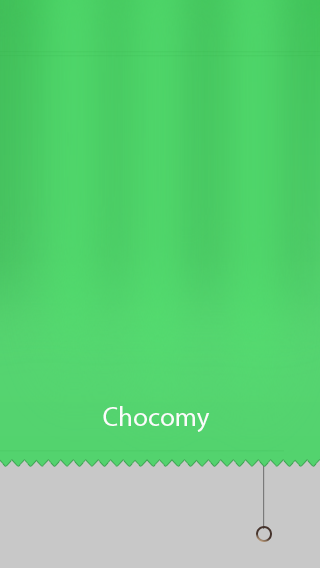
<style>
.page{position:relative;width:320px;height:568px}
.page>*{position:absolute;margin:0}
.t1{font:27px "MyriadPro-Regular";color:#fbfbfb}
</style>
<div class="page">
<p class="t1" style="left:103px;top:406px;width:107px;height:26px">Chocomy</p>
</div>
